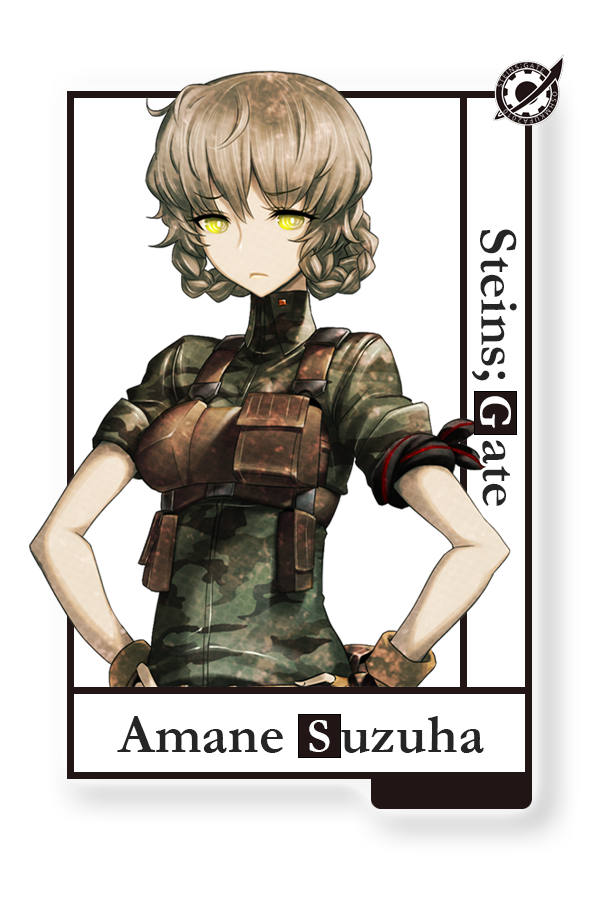
<style>
.page{position:relative;width:600px;height:900px;background:#ffffff}
.page>*{position:absolute;margin:0}
.t1{font:55.4px "Garamond-Bold";color:#252525}
.t2{font:47px "Garamond-Bold";color:#ffffff}
</style>
<div class="page">
<p class="t1" style="left:472px;top:229px;width:45px;height:277px;rotate:89deg">Steins;    ate</p>
<p class="t2" style="left:480px;top:396px;width:31px;height:32px;rotate:90deg">G</p>
<p class="t1" style="left:117px;top:716px;width:367px;height:37px">Amane    uzuha</p>
<p class="t2" style="left:309px;top:720px;width:21px;height:32px">S</p>
</div>
